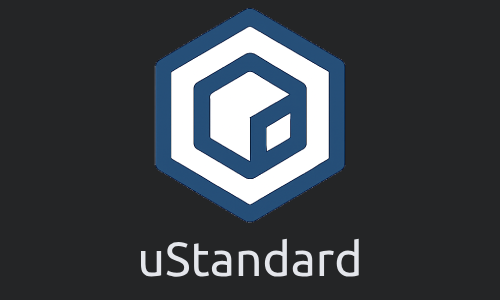
<style>
.page{position:relative;width:500px;height:300px;background:#242526}
.page>*{position:absolute;margin:0}
.t1{font:48px "Ubuntu-Regular";color:#e4e6eb}
</style>
<div class="page">
<p class="t1" style="left:140px;top:238px;width:219px;height:39px">uStandard</p>
</div>
